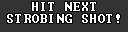
<style>
.page{position:relative;width:128px;height:32px;background:#333333}
.page>*{position:absolute;margin:0}
.t1{font:12px/11.9px "Terminal";letter-spacing:0.075em;color:#ffffff}
</style>
<div class="page">
<p class="t1" style="left:7px;top:2px;width:113px;height:21px;text-align:center">HIT NEXT<br>STROBING SHOT!</p>
</div>
